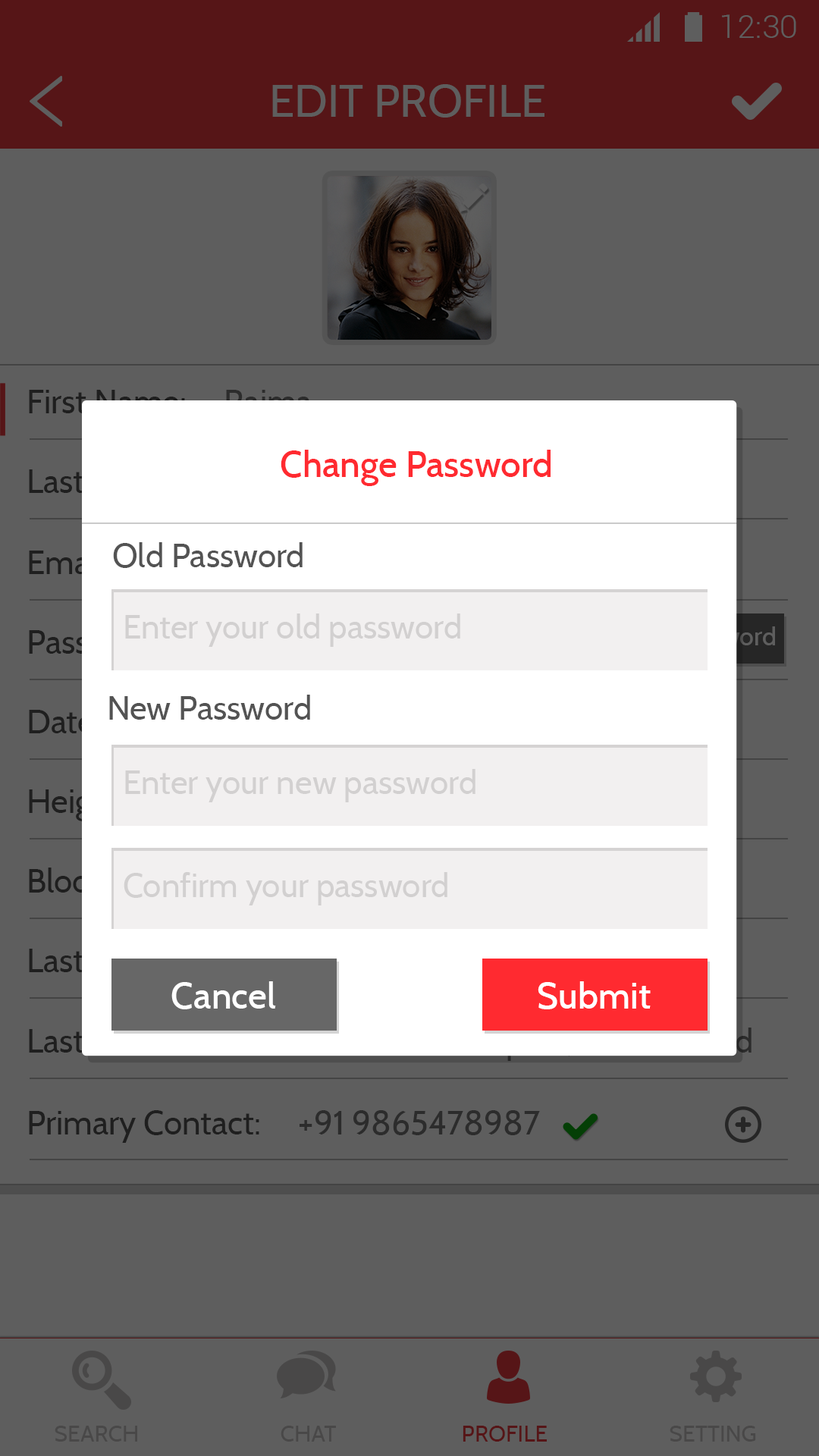
<style>
.page{position:relative;width:819px;height:1456px;background:#5e5e5e}
.page>*{position:absolute;margin:0}
.t1{font:32.3px "Roboto-Light";color:#5e5e5e}
.t2{font:45.5px "Cabin-Regular";color:#5e5e5e}
.t3{font:36.4px "Cabin-Medium";color:#ff2a30}
.t4{font:33.4px "Cabin-Regular";color:#535353}
.t5{font:33.4px "Cabin-Regular";color:#d2d0d0}
.t6{font:36.4px "Cabin-Medium";color:#ffffff}
.t7{font:33.3px "Cabin-Regular";color:#2c2c2c}
.t8{font:22.7px "Cabin-Regular";color:#494848}
.t9{font:22.7px "Cabin-Regular";color:#561517}
</style>
<div class="page">
<p class="t1" style="left:722px;top:14px;width:74px;height:24px">12:30</p>
<p class="t2" style="left:272px;top:84px;width:272px;height:34px">EDIT PROFILE</p>
<p class="t3" style="left:281px;top:450px;width:270px;height:36px">Change Password</p>
<p class="t4" style="left:113px;top:542px;width:190px;height:26px">Old Password</p>
<p class="t5" style="left:125px;top:613px;width:335px;height:34px">Enter your old password</p>
<p class="t4" style="left:109px;top:695px;width:201px;height:25px">New Password</p>
<p class="t5" style="left:125px;top:769px;width:350px;height:33px">Enter your new password</p>
<p class="t5" style="left:124px;top:872px;width:323px;height:33px">Confirm your password</p>
<p class="t6" style="left:171px;top:981px;width:105px;height:28px">Cancel</p>
<p class="t6" style="left:538px;top:981px;width:113px;height:28px">Submit</p>
<p class="t7" style="left:29px;top:1110px;width:511px;height:33px">Primary Contact:     +91 9865478987</p>
<p class="t8" style="left:55px;top:1426px;width:82px;height:16px">SEARCH</p>
<p class="t8" style="left:281px;top:1426px;width:55px;height:16px">CHAT</p>
<p class="t9" style="left:463px;top:1426px;width:84px;height:16px">PROFILE</p>
<p class="t8" style="left:670px;top:1426px;width:86px;height:16px">SETTING</p>
</div>
